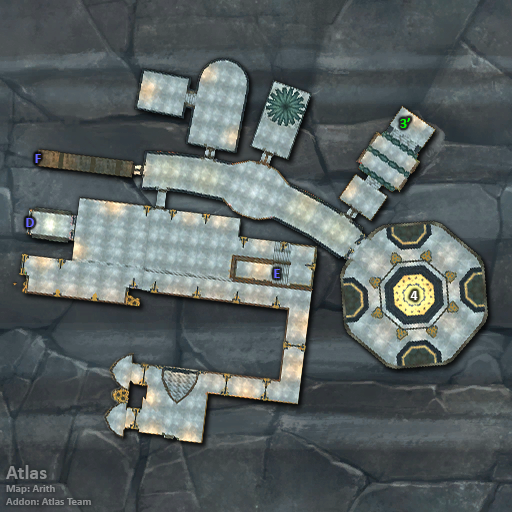
<style>
.page{position:relative;width:512px;height:512px}
.page>*{position:absolute;margin:0}
.t1{font:14px "Calibri-Bold";color:#00ff00}
.t2{font:14px "Calibri-Bold";color:#6666ff}
.t3{font:14px "Calibri-Bold";color:#ffffff}
.t4{font:11px "Calibri-Bold";color:#8a8c8e}
.t5{font:20px "Calibri-Bold";color:#8a8c8e}
</style>
<div class="page">
<p class="t1" style="left:400px;top:118px;width:10px;height:10px">3’</p>
<p class="t2" style="left:35px;top:154px;width:6px;height:9px">F</p>
<p class="t2" style="left:26px;top:218px;width:8px;height:9px">D</p>
<p class="t2" style="left:274px;top:269px;width:6px;height:9px">E</p>
<p class="t3" style="left:410px;top:291px;width:8px;height:9px">4</p>
<p class="t4" style="left:6px;top:465px;width:85px;height:40px"><span class="t5">Atlas<br></span>Map: Arith<br>Addon: Atlas Team</p>
</div>
